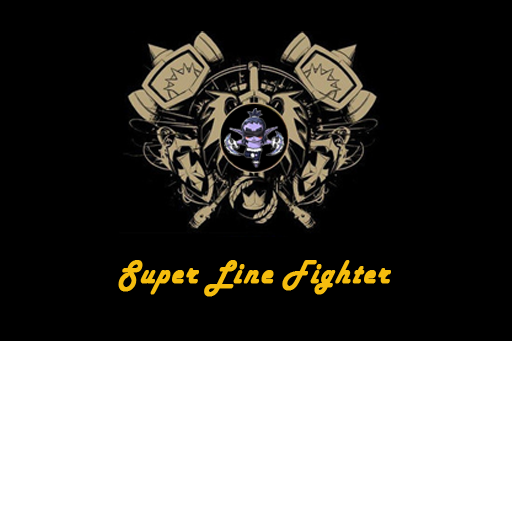
<style>
.page{position:relative;width:512px;height:512px;background:#000000}
.page>*{position:absolute;margin:0}
.t1{font:34px "HarlowSolid";letter-spacing:0.05em;color:#f5bd0e;font-weight:bold;font-style:italic;scale:0.86 1}
</style>
<div class="page">
<p class="t1" style="left:118px;top:260px;width:273px;height:37px">Super Line Fighter</p>
</div>
